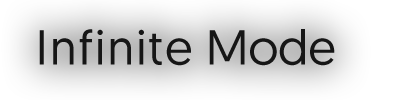
<style>
.page{position:relative;width:400px;height:100px}
.page>*{position:absolute;margin:0}
.t1{font:48.9px "Geomanist-Regular";letter-spacing:0.04em;color:#161616}
.t2{font:48.9px "Geomanist-Regular";color:#161616}
</style>
<div class="page">
<p class="t1" style="left:39px;top:29px;width:296px;height:37px">Infinite <span class="t2">Mode</span></p>
</div>
